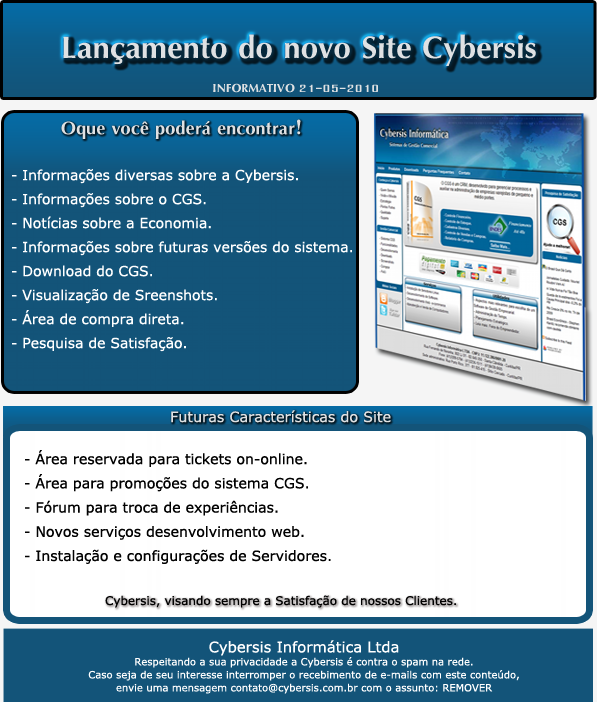
<style>
.page{position:relative;width:597px;height:702px;background:#135479}
.page>*{position:absolute;margin:0}
.t1{font:48px "IrisUPCBold";color:#dfe2e3}
.t2{font:18px "IrisUPCBold";color:#dfe2e3}
.t3{font:28.1px "IrisUPCBold";color:#dfe2e3}
.t4{font:14px/24px "Verdana";color:#ffffff}
.t5{font:14.4px "Verdana";color:#dfe2e3}
.t6{font:14.1px/24.2px "Verdana";color:#010101}
.t7{font:12px "Verdana";color:#010101}
.t8{font:10px/13px "Verdana";color:#ffffff}
.t9{font:14.8px/25.3px "Verdana";color:#ffffff}
</style>
<div class="page">
<p class="t1" style="left:63px;top:34px;width:473px;height:32px">Lançamento do novo Site Cybersis</p>
<p class="t2" style="left:213px;top:83px;width:165px;height:10px">INFORMATIVO 21-05-2010</p>
<p class="t3" style="left:61px;top:119px;width:240px;height:20px">Oque você poderá encontrar!</p>
<p class="t4" style="left:12px;top:169px;width:340px;height:183px">- Informações diversas sobre a Cybersis. <br>- Informações sobre o CGS.<br>- Notícias sobre a Economia.<br>- Informações sobre futuras versões do sistema.<br>- Download do CGS.<br>- Visualização de Sreenshots.<br>- Área de compra direta.<br>- Pesquisa de Satisfação.</p>
<p class="t5" style="left:171px;top:410px;width:220px;height:13px">Futuras Características do Site</p>
<p class="t6" style="left:25px;top:450px;width:306px;height:114px">- Área reservada para tickets on-online.<br>- Área para promoções do sistema CGS.<br>- Fórum para troca de experiências.<br>- Novos serviços desenvolvimento web.<br>- Instalação e configurações de Servidores.</p>
<p class="t7" style="left:105px;top:595px;width:351px;height:13px">Cybersis, visando sempre a Satisfação de nossos Clientes.</p>
<p class="t8" style="left:88px;top:640px;width:431px;height:54px;text-align:center"><span class="t9">Cybersis Informática Ltda<br></span>Respeitando a sua privacidade a Cybersis é contra o spam na rede.<br>Caso seja de seu interesse interromper o recebimento de e-mails com este conteúdo,<br>envie uma mensagem contato@cybersis.com.br com o assunto: REMOVER</p>
</div>
